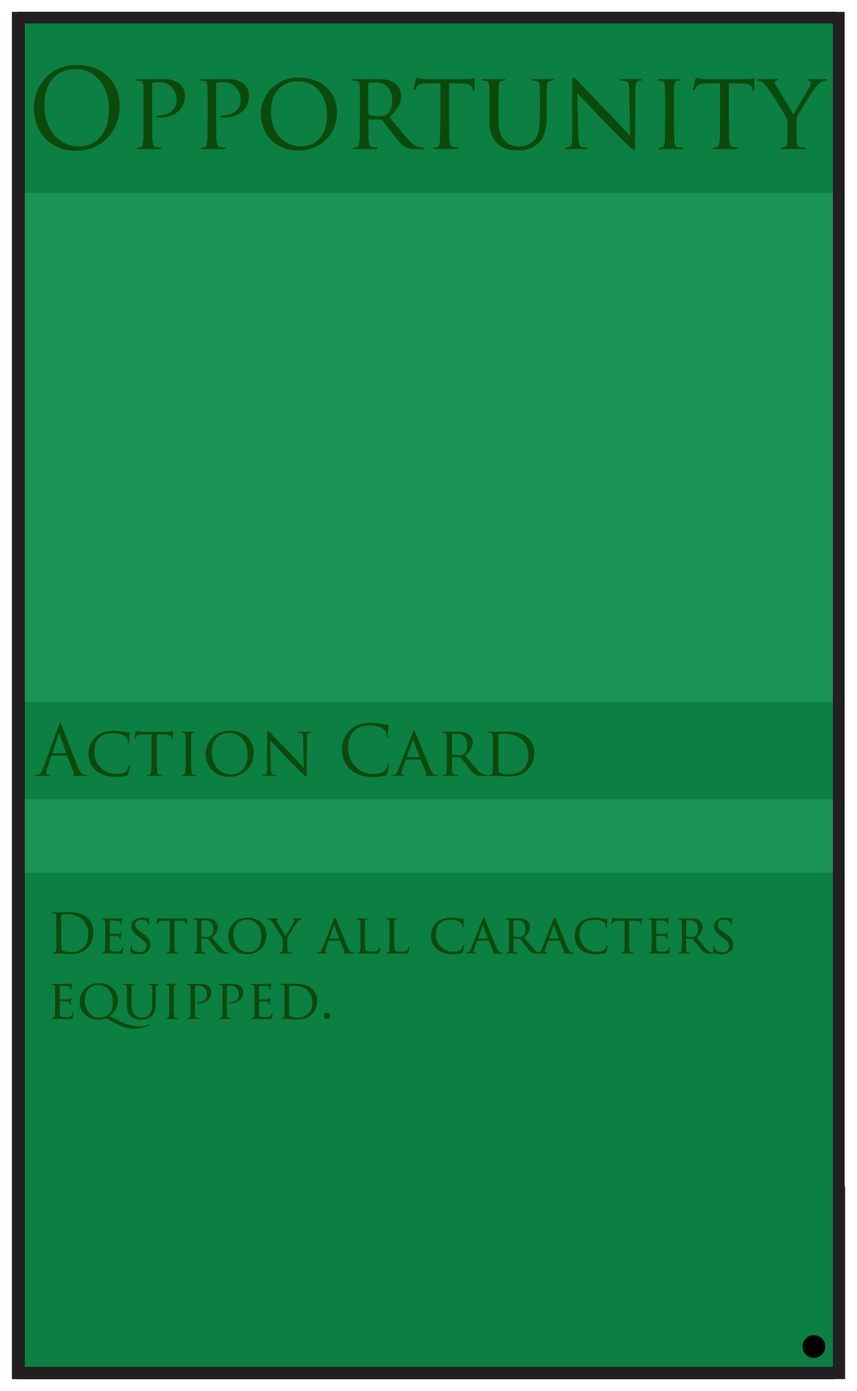
<style>
.page{position:relative;width:857px;height:1391px;background:#0c7f42}
.page>*{position:absolute;margin:0}
.t1{font:109.1px "TrajanPro-Regular";color:#0c4a0c}
.t2{font:68.9px "TrajanPro-Regular";color:#0c4a0c}
.t3{font:54.5px "TrajanPro-Regular";color:#0c4a0c}
</style>
<div class="page">
<p class="t1" style="left:34px;top:65px;width:793px;height:86px">Opportunity</p>
<p class="t2" style="left:34px;top:723px;width:501px;height:54px">Action Card</p>
<p class="t3" style="left:51px;top:912px;width:683px;height:117px">Destroy all caracters <br>equipped.</p>
</div>
